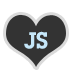
<style>
.page{position:relative;width:70px;height:70px;background:#ffffff}
.page>*{position:absolute;margin:0}
.t1{font:22.6px "LubalinGraphStd-Demi";color:#c5e7f9}
</style>
<div class="page">
<p class="t1" style="left:24px;top:31px;width:24px;height:18px">JS</p>
</div>
